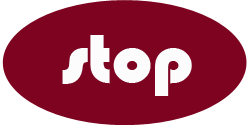
<style>
.page{position:relative;width:248px;height:125px;background:#7d0320}
.page>*{position:absolute;margin:0}
.t1{font:72px "Bauhaus93";color:#fcfcfd}
</style>
<div class="page">
<p class="t1" style="left:62px;top:35px;width:130px;height:61px">stop</p>
</div>
